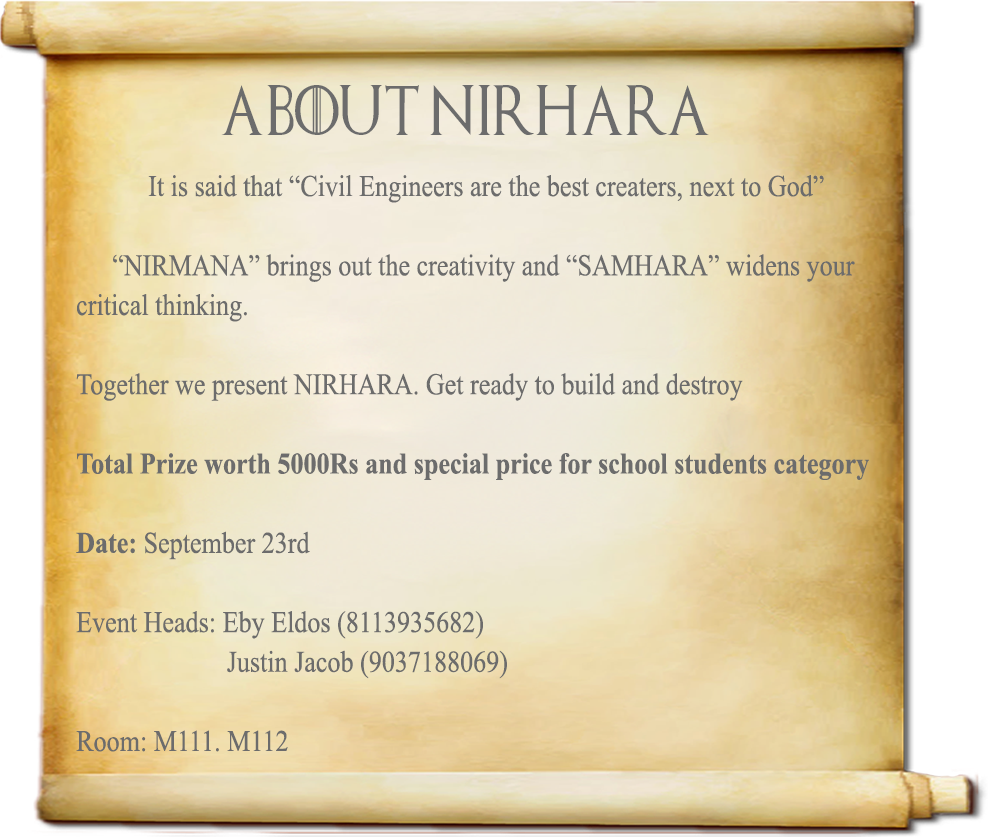
<style>
.page{position:relative;width:1000px;height:837px}
.page>*{position:absolute;margin:0}
.t1{font:50px "GameofThrones";color:#6c6c6c;scale:0.87 1}
.t2{font:30px/39.6px "TimesNewRomanPSMT";color:#6c6c6c;scale:0.87 1}
.t3{font:30px/39.6px "TimesNewRomanPS-BoldMT";color:#6c6c6c;scale:0.87 1}
</style>
<div class="page">
<p class="t1" style="left:221px;top:85px;width:488px;height:50px">About nirhara</p>
<p class="t2" style="left:76px;top:175px;width:793px;height:577px">It is said that “Civil Engineers are the best creaters, next to God”<br> <br> “NIRMANA” brings out the creativity and “SAMHARA” widens your<br>critical thinking.<br><br>Together we present NIRHARA. Get ready to build and destroy<br><br><span class="t3">Total Prize worth 5000Rs and special price for school students category<br><br>Date: </span>September 23rd<br><br>Event Heads: Eby Eldos (8113935682)<br>     Justin Jacob (9037188069)<br><br>Room: M111. M112</p>
</div>
